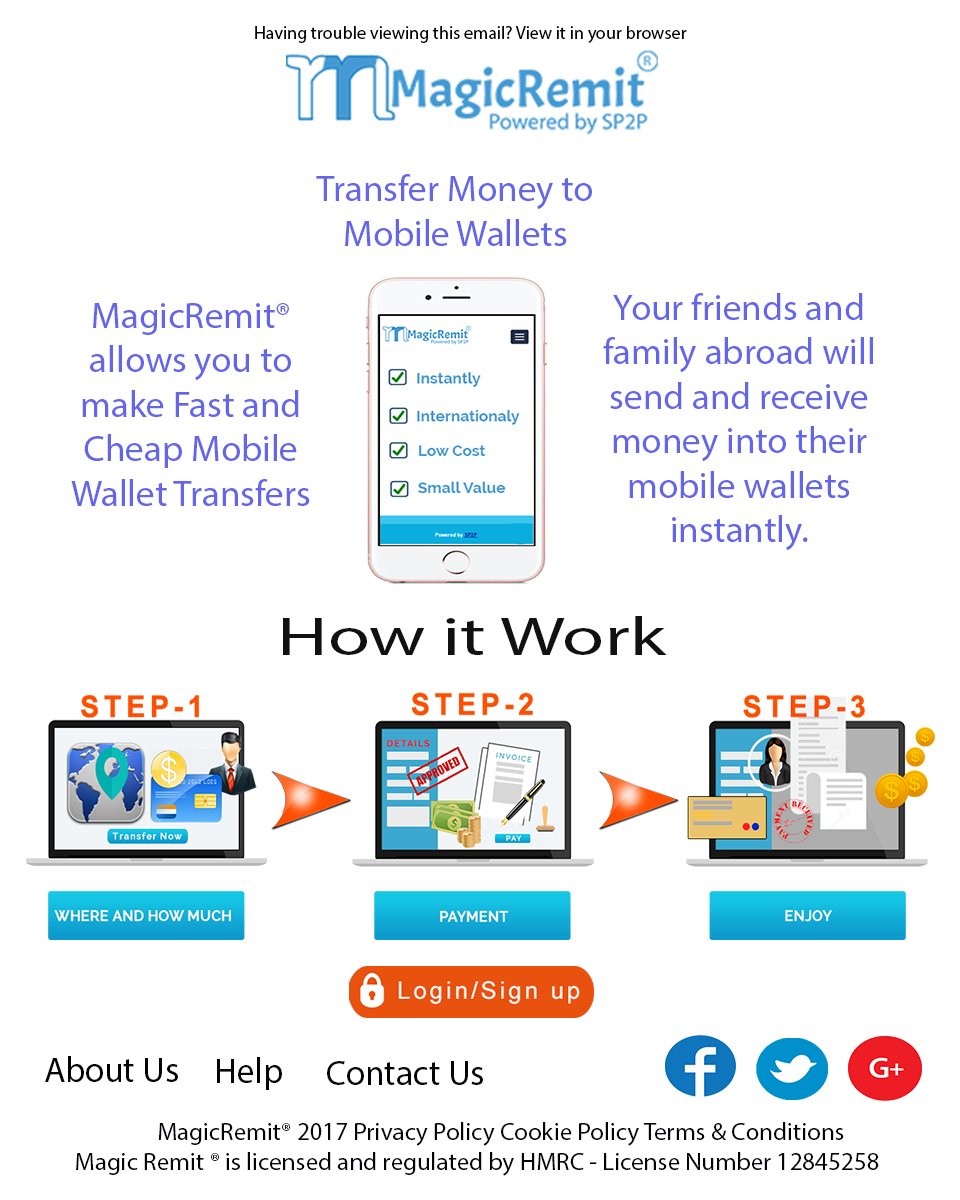
<style>
.page{position:relative;width:960px;height:1200px;background:#ffffff}
.page>*{position:absolute;margin:0}
.t1{font:18px "MyriadPro-Regular";color:#000000}
.t2{font:37px "MyriadPro-Regular";color:#6366ec}
.t3{font:53.9px "MyriadPro-Regular";color:#111111;scale:1.43 1}
.t4{font:35.5px "MyriadPro-Regular";color:#030306}
.t5{font:35.5px "MyriadPro-Regular";color:#04040a}
.t6{font:25px "MyriadPro-Regular";color:#040409}
</style>
<div class="page">
<p class="t1" style="left:255px;top:26px;width:432px;height:17px">Having trouble viewing this email? View it in your browser</p>
<p class="t2" style="left:316px;top:174px;width:276px;height:72px;text-align:center">Transfer Money to Mobile Wallets</p>
<p class="t2" style="left:603px;top:293px;width:270px;height:257px;text-align:center">Your friends and family abroad will send and receive money into their mobile wallets <br>instantly.</p>
<p class="t2" style="left:71px;top:303px;width:239px;height:203px;text-align:center">MagicRemit® allows you to make Fast and Cheap Mobile Wallet Transfers</p>
<p class="t3" style="left:283px;top:616px;width:384px;height:39px">How it Work</p>
<p class="t4" style="left:45px;top:1056px;width:133px;height:26px">About Us</p>
<p class="t5" style="left:217px;top:1057px;width:65px;height:33px">Help</p>
<p class="t5" style="left:327px;top:1061px;width:156px;height:24px">Contact Us</p>
<p class="t6" style="left:76px;top:1122px;width:803px;height:54px;text-align:center">MagicRemit® 2017 Privacy Policy Cookie Policy Terms &amp; Conditions<br>Magic Remit ® is licensed and regulated by HMRC - License Number 12845258<br>Magic Remit ® is licensed and regulated by HMRC - License Number 12845258</p>
</div>
